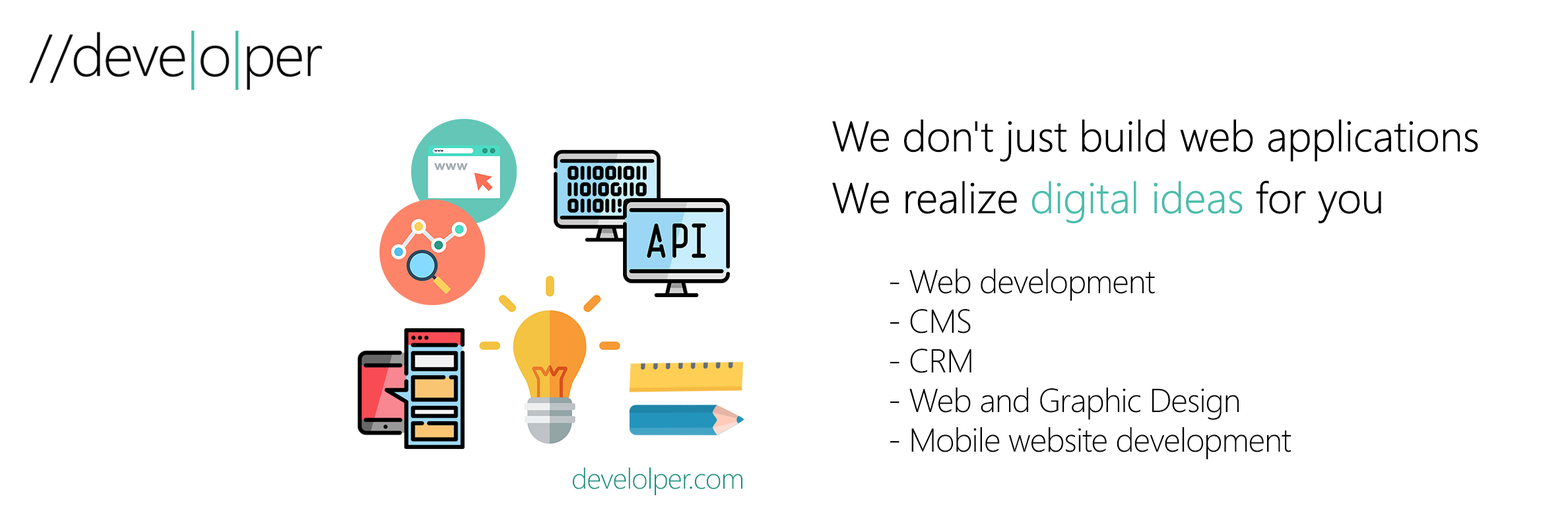
<style>
.page{position:relative;width:1568px;height:523px;background:#ffffff}
.page>*{position:absolute;margin:0}
.t1{font:39.6px/61.6px "MicrosoftJhengHeiUILight";letter-spacing:-0.025em;color:#010000;font-weight:bold}
.t2{font:39.6px/61.6px "MicrosoftJhengHeiUILight";letter-spacing:-0.025em;color:#4abdac;font-weight:bold}
.t3{font:30.8px/39.6px "MicrosoftJhengHeiUILight";letter-spacing:-0.025em;color:#010000}
.t4{font:26.4px "MicrosoftJhengHeiUILight";letter-spacing:-0.025em;color:#14917e}
</style>
<div class="page">
<p class="t1" style="left:832px;top:119px;width:646px;height:105px">We don't just build web applications <br>We realize <span class="t2">digital ideas </span>for you</p>
<p class="t3" style="left:890px;top:268px;width:401px;height:191px">- Web development<br>- CMS <br>- CRM<br>- Web and Graphic Design <br>- Mobile website development</p>
<p class="t4" style="left:573px;top:467px;width:169px;height:28px">develolper.com</p>
</div>
